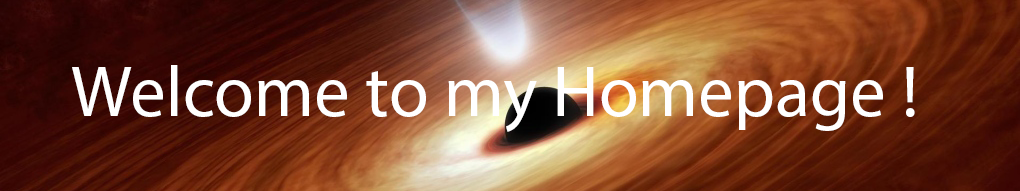
<style>
.page{position:relative;width:1020px;height:191px}
.page>*{position:absolute;margin:0}
.t1{font:72px "MyriadPro-Regular";color:#ffffff}
</style>
<div class="page">
<p class="t1" style="left:72px;top:65px;width:843px;height:67px">Welcome to my Homepage !</p>
</div>
